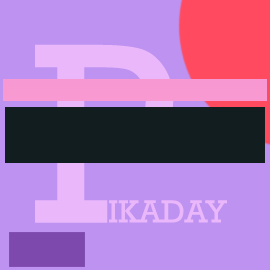
<style>
.page{position:relative;width:270px;height:270px;background:#bd92f1}
.page>*{position:absolute;margin:0}
.t1{font:32.5px "Rockwell";color:#eab7fb}
</style>
<div class="page">
<p class="t1" style="left:109px;top:200px;width:118px;height:23px">IKADAY</p>
</div>
